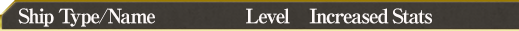
<style>
.page{position:relative;width:519px;height:31px}
.page>*{position:absolute;margin:0}
.t1{font:20px "RyuminPro-ExBold";letter-spacing:-0.08em;color:#fef9f8}
</style>
<div class="page">
<p class="t1" style="left:18px;top:8px;width:414px;height:19px">Ship Type/Name                  Level    Increased Stats</p>
</div>
